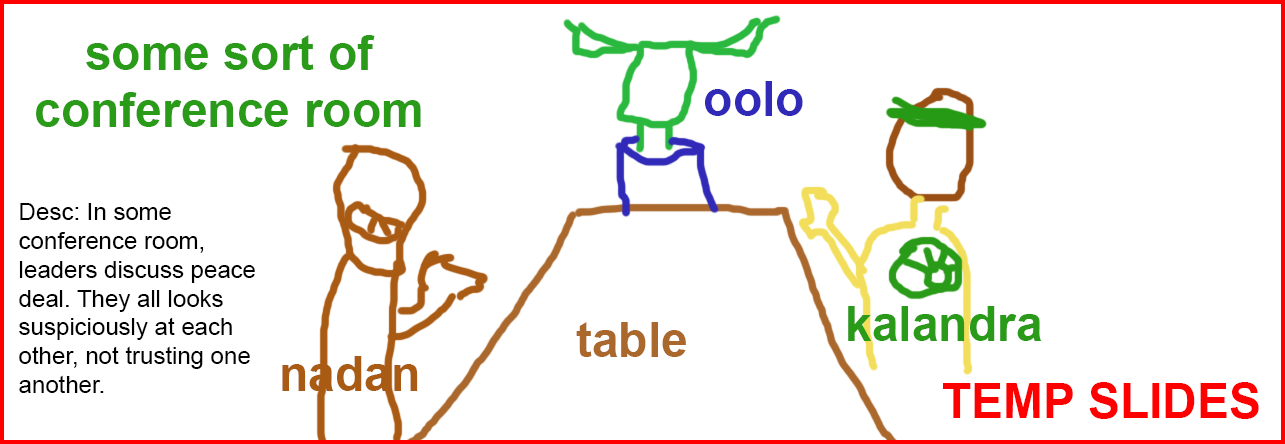
<style>
.page{position:relative;width:1285px;height:444px;background:#ffffff}
.page>*{position:absolute;margin:0}
.t1{font:48px "Arial-BoldMT";color:#2a9b18}
.t2{font:48px "Arial-BoldMT";color:#312ab8}
.t3{font:24px "ArialMT";color:#000000}
.t4{font:48px "Arial-BoldMT";color:#aa682d}
.t5{font:48px "Arial-BoldMT";color:#a95a13}
.t6{font:48px "Arial-BoldMT";color:#ff0000}
</style>
<div class="page">
<p class="t1" style="left:36px;top:35px;width:385px;height:92px;text-align:center">some sort of<br>conference room</p>
<p class="t2" style="left:705px;top:81px;width:98px;height:35px">oolo</p>
<p class="t3" style="left:19px;top:203px;width:236px;height:190px">Desc: In some conference room, leaders discuss peace deal. They all looks suspiciously at each other, not trusting one another.</p>
<p class="t1" style="left:848px;top:306px;width:194px;height:35px">kalandra</p>
<p class="t4" style="left:576px;top:322px;width:110px;height:35px">table</p>
<p class="t5" style="left:282px;top:356px;width:136px;height:35px">nadan</p>
<p class="t6" style="left:943px;top:382px;width:316px;height:37px">TEMP SLIDES</p>
</div>
